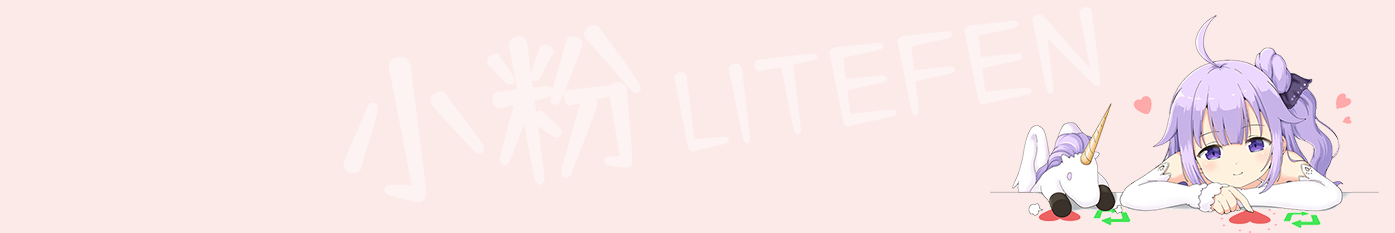
<style>
.page{position:relative;width:1395px;height:233px;background:#fceae8}
.page>*{position:absolute;margin:0}
.t1{font:148.2px "TsangerShuYuanT-W03";color:#ffffff;font-variant:small-caps}
.t2{font:160.5px "TsangerShuYuanT-W03";color:#ffffff}
</style>
<div class="page">
<p class="t1" style="left:674px;top:7px;width:427px;height:145px;rotate:-9deg">litefen</p>
<p class="t2" style="left:343px;top:24px;width:298px;height:179px;rotate:-9deg">小粉</p>
</div>
